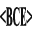
<style>
.page{position:relative;width:32px;height:32px;background:#ffffff}
.page>*{position:absolute;margin:0}
.t1{font:27.6px "TimesNewRomanPS-BoldMT";color:#111111;scale:0.37 1}
</style>
<div class="page">
<p class="t1" style="left:0px;top:7px;width:33px;height:20px">&lt;ВСЕ&gt;</p>
</div>
